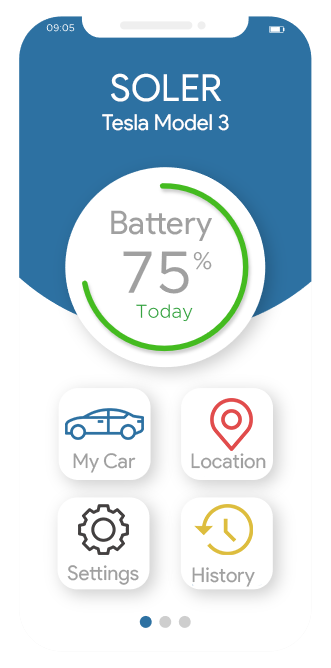
<style>
.page{position:relative;width:331px;height:668px;background:#ffffff}
.page>*{position:absolute;margin:0}
.t1{font:37.4px "ProductSans-Regular";color:#ffffff}
.t2{font:21.9px "ProductSans-Regular";color:#ffffff}
.t3{font:32.5px "ProductSans-Regular";color:#a0a0a0}
.t4{font:20.3px "ProductSans-Regular";color:#a0a0a0}
</style>
<div class="page">
<p class="t1" style="left:111px;top:73px;width:111px;height:29px">SOLER</p>
<p class="t2" style="left:102px;top:114px;width:127px;height:17px">Tesla Model 3</p>
<p class="t3" style="left:111px;top:210px;width:101px;height:31px">Battery</p>
<p class="t4" style="left:73px;top:453px;width:63px;height:20px">My Car</p>
<p class="t4" style="left:191px;top:453px;width:75px;height:16px">Location</p>
<p class="t4" style="left:67px;top:565px;width:72px;height:20px">Settings</p>
<p class="t4" style="left:192px;top:567px;width:63px;height:20px">History</p>
</div>
